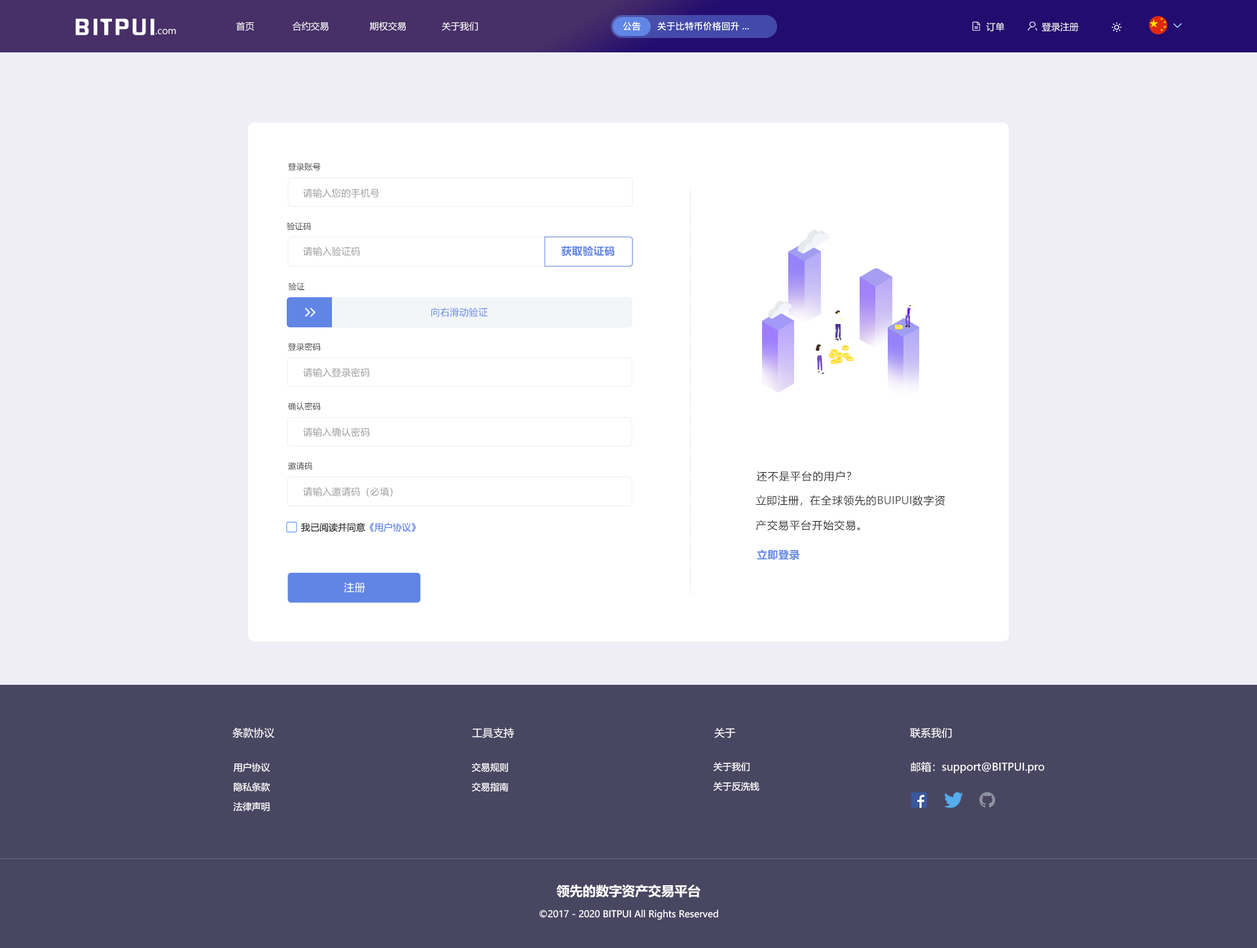
<style>
.page{position:relative;width:1257px;height:948px;background:#efeef7}
.page>*{position:absolute;margin:0}
.t1{font:20.1px "FZHZGBJW--GB1-0";letter-spacing:0.1em;color:#ffffff;scale:1.14 1}
.t2{font:9.2px "MicrosoftYaHei";color:#ffffff}
.t3{font:9.2px "PingFang-SC-Bold";color:#ffffff}
.t4{font:8px "MicrosoftYaHei";letter-spacing:0.03em;color:#333333}
.t5{font:9.3px "MicrosoftYaHei";letter-spacing:0.03em;color:#999999}
.t6{font:10.5px "MicrosoftYaHei-Bold";letter-spacing:0.03em;color:#6185e5}
.t7{font:9.3px "MicrosoftYaHei";letter-spacing:0.03em;color:#6185e5}
.t8{font:10.5px "MicrosoftYaHei";letter-spacing:0.07em;color:#333333}
.t9{font:10.5px/24.9px "MicrosoftYaHei";letter-spacing:0.07em;color:#333333}
.t10{font:10.5px/24.9px "MicrosoftYaHei";letter-spacing:0.03em;color:#333333}
.t11{font:10.6px/31.9px "MicrosoftYaHei";color:#666666}
.t12{font:9.2px "MicrosoftYaHei";color:#333333}
.t13{font:9.2px "MicrosoftYaHei";color:#6185e5}
.t14{font:10.5px "MicrosoftYaHei";letter-spacing:0.03em;color:#ffffff}
.t15{font:10.5px "MicrosoftYaHei";color:#ffffff}
.t16{font:9.2px/19.6px "MicrosoftYaHei";color:#ffffff}
.t17{font:13.1px "MicrosoftYaHei-Bold";color:#ffffff}
</style>
<div class="page">
<p class="t1" style="left:75px;top:18px;width:80px;height:17px">BITPUI</p>
<p class="t2" style="left:155px;top:29px;width:21px;height:6px">.com</p>
<p class="t2" style="left:236px;top:22px;width:242px;height:9px">首页              合约交易               期权交易             关于我们</p>
<p class="t3" style="left:623px;top:22px;width:18px;height:9px">公告</p>
<p class="t3" style="left:658px;top:22px;width:91px;height:9px">关于比特币价格回升...</p>
<p class="t2" style="left:986px;top:22px;width:19px;height:9px">订单</p>
<p class="t2" style="left:1042px;top:22px;width:37px;height:9px">登录注册</p>
<p class="t4" style="left:288px;top:163px;width:33px;height:8px">登录账号</p>
<p class="t5" style="left:303px;top:189px;width:77px;height:9px">请输入您的手机号</p>
<p class="t4" style="left:287px;top:223px;width:24px;height:8px">验证码</p>
<p class="t6" style="left:561px;top:246px;width:54px;height:11px">获取验证码</p>
<p class="t5" style="left:303px;top:247px;width:57px;height:9px">请输入验证码</p>
<p class="t4" style="left:288px;top:283px;width:17px;height:8px">验证</p>
<p class="t7" style="left:432px;top:308px;width:56px;height:9px">向右滑动验证</p>
<p class="t4" style="left:288px;top:343px;width:32px;height:8px">登录密码</p>
<p class="t5" style="left:303px;top:368px;width:67px;height:9px">请输入登录密码</p>
<p class="t4" style="left:288px;top:402px;width:32px;height:9px">确认密码</p>
<p class="t5" style="left:303px;top:428px;width:67px;height:9px">请输入确认密码</p>
<p class="t4" style="left:288px;top:462px;width:24px;height:8px">邀请码</p>
<p class="t8" style="left:757px;top:471px;width:94px;height:11px">还不是平台的用户？</p>
<p class="t5" style="left:303px;top:487px;width:90px;height:10px">请输入邀请码（必填）</p>
<p class="t9" style="left:756px;top:495px;width:190px;height:36px"><span class="t10">立即注册，</span>在全球领先的<span class="t11">BUIPUI</span>数字资<br>产交易平台开始交易。</p>
<p class="t12" style="left:301px;top:523px;width:116px;height:9px">我已阅读并同意<span class="t13">《用户协议》</span></p>
<p class="t6" style="left:757px;top:549px;width:43px;height:12px">立即登录</p>
<p class="t14" style="left:344px;top:582px;width:21px;height:11px">注册</p>
<p class="t15" style="left:232px;top:728px;width:42px;height:10px">条款协议</p>
<p class="t15" style="left:472px;top:728px;width:42px;height:11px">工具支持</p>
<p class="t15" style="left:715px;top:728px;width:21px;height:10px">关于</p>
<p class="t15" style="left:910px;top:728px;width:42px;height:11px">联系我们</p>
<p class="t15" style="left:911px;top:762px;width:134px;height:12px">邮箱：support@BITPUI.pro</p>
<p class="t16" style="left:233px;top:763px;width:37px;height:48px;text-align:center">用户协议<br>隐私条款<br>法律声明</p>
<p class="t16" style="left:472px;top:763px;width:37px;height:29px">交易规则<br>交易指南</p>
<p class="t16" style="left:713px;top:762px;width:47px;height:29px">关于我们<br>关于反洗钱</p>
<p class="t17" style="left:557px;top:885px;width:144px;height:13px">领先的数字资产交易平台</p>
<p class="t2" style="left:540px;top:910px;width:178px;height:10px">©2017 - 2020 BITPUI All Rights Reserved</p>
</div>
